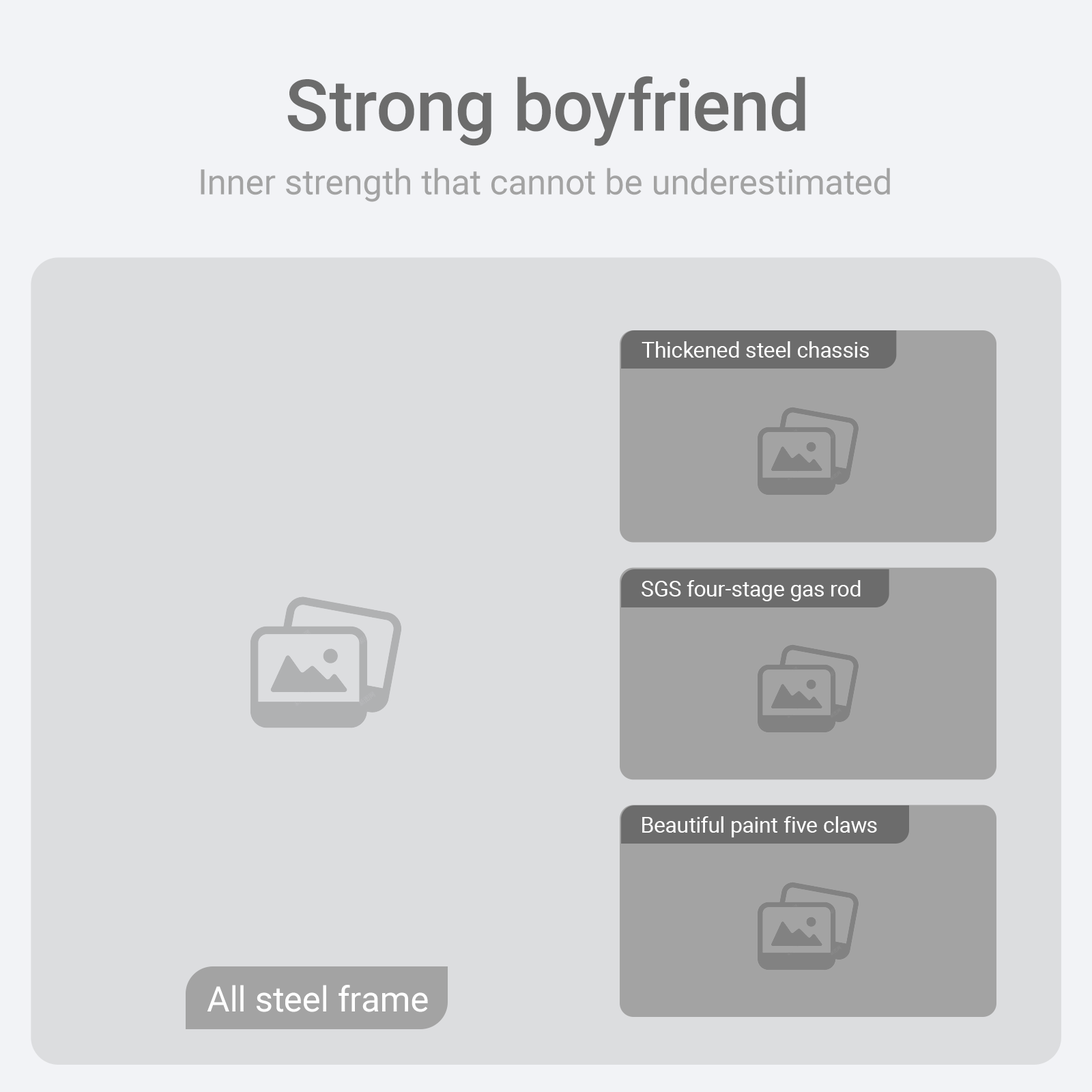
<style>
.page{position:relative;width:1092px;height:1092px;background:#dcdddf}
.page>*{position:absolute;margin:0}
.t1{font:71.3px "Roboto-Medium";color:#6c6c6c}
.t2{font:34.9px "Roboto-Regular";color:#a3a3a3}
.t3{font:21.6px "Roboto-Regular";color:#ffffff}
.t4{font:34.9px "Roboto-Regular";color:#ffffff}
</style>
<div class="page">
<p class="t1" style="left:287px;top:76px;width:518px;height:70px">Strong boyfriend</p>
<p class="t2" style="left:201px;top:168px;width:689px;height:34px">Inner strength that cannot be underestimated</p>
<p class="t3" style="left:642px;top:341px;width:227px;height:17px">Thickened steel chassis</p>
<p class="t3" style="left:642px;top:580px;width:219px;height:21px">SGS four-stage gas rod</p>
<p class="t3" style="left:642px;top:816px;width:235px;height:21px">Beautiful paint five claws</p>
<p class="t4" style="left:207px;top:985px;width:221px;height:27px">All steel frame</p>
</div>
